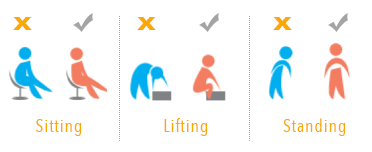
<style>
.page{position:relative;width:372px;height:152px;background:#ffffff}
.page>*{position:absolute;margin:0}
.t1{font:18.8px "AvenirNextCondensed-Bold";letter-spacing:0.05em;color:#fca800;scale:1.85 1}
.t2{font:18px "AvenirNextCondensed-Regular";letter-spacing:0.05em;color:#fca800}
</style>
<div class="page">
<p class="t1" style="left:13px;top:17px;width:19px;height:13px">X</p>
<p class="t1" style="left:137px;top:17px;width:19px;height:13px">X</p>
<p class="t1" style="left:273px;top:17px;width:19px;height:13px">X</p>
<p class="t2" style="left:36px;top:119px;width:46px;height:17px">Sitting</p>
<p class="t2" style="left:164px;top:118px;width:44px;height:18px">Lifting</p>
<p class="t2" style="left:283px;top:118px;width:63px;height:18px">Standing</p>
</div>
